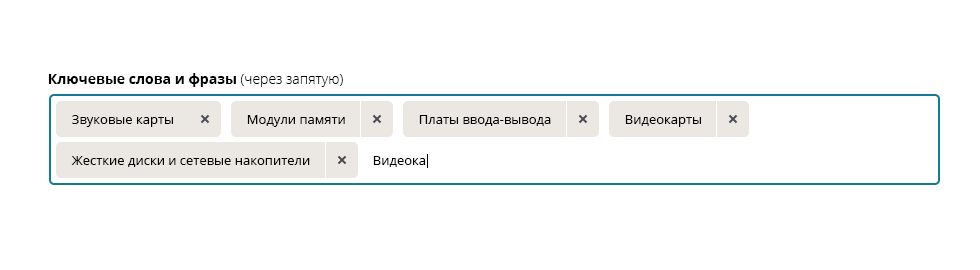
<style>
.page{position:relative;width:980px;height:270px;background:#ffffff}
.page>*{position:absolute;margin:0}
.t1{font:14px "OpenSans-Bold";color:#000000}
.t2{font:14px "OpenSans-Light";color:#000000}
.t3{font:13px "OpenSans";color:#000000}
</style>
<div class="page">
<p class="t1" style="left:48px;top:73px;width:295px;height:14px">Ключевые слова и фразы <span class="t2">(через запятую)</span></p>
<p class="t3" style="left:72px;top:115px;width:101px;height:12px">Звуковые карты</p>
<p class="t3" style="left:247px;top:115px;width:98px;height:12px">Модули памяти</p>
<p class="t3" style="left:419px;top:115px;width:132px;height:11px">Платы ввода-вывода</p>
<p class="t3" style="left:625px;top:115px;width:76px;height:12px">Видеокарты</p>
<p class="t3" style="left:71px;top:156px;width:239px;height:11px">Жесткие диски и сетевые накопители</p>
<p class="t3" style="left:373px;top:156px;width:53px;height:11px">Видеока</p>
</div>
